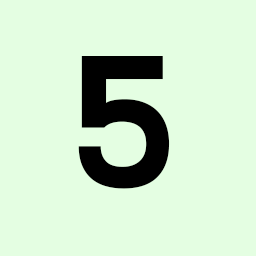
<style>
.page{position:relative;width:256px;height:256px;background:#e4fee2}
.page>*{position:absolute;margin:0}
.t1{font:153.3px "BMDoHyeon";color:#000000}
</style>
<div class="page">
<p class="t1" style="left:78px;top:56px;width:92px;height:133px">5</p>
</div>
